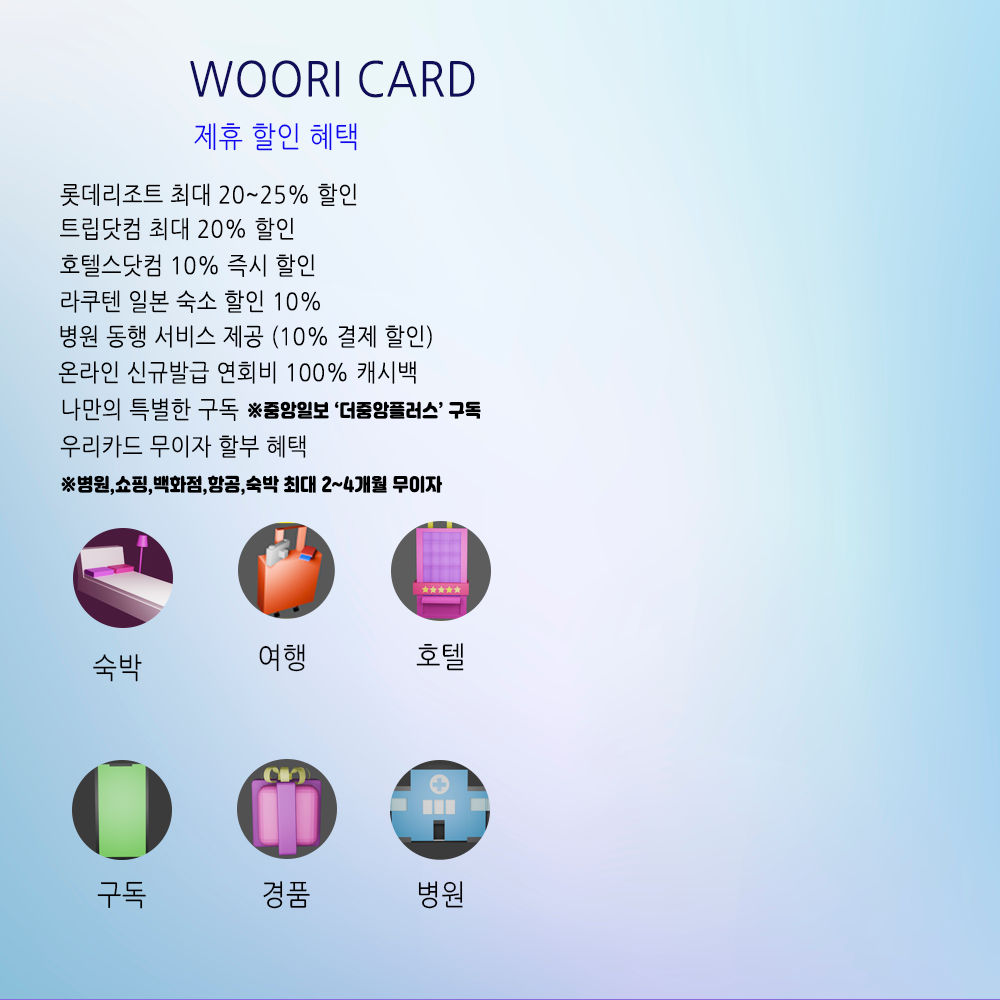
<style>
.page{position:relative;width:1000px;height:1000px}
.page>*{position:absolute;margin:0}
.t1{font:48px "NanumGothic";letter-spacing:0.02em;color:#100d59;text-transform:uppercase;scale:0.9 1}
.t2{font:29px "NanumGothic";letter-spacing:0.02em;color:#1107ef;text-transform:uppercase;scale:0.9 1}
.t3{font:24px "NanumGothic";letter-spacing:0.02em;color:#060202;text-transform:uppercase;scale:0.9 1}
.t4{font:24px "NanumGothic";letter-spacing:0.02em;color:#000000;text-transform:uppercase;scale:0.9 1}
.t5{font:18px "Jalnan2TTF";letter-spacing:0.02em;color:#000000;text-transform:uppercase;scale:0.9 1}
.t6{font:29px "NanumGothic";letter-spacing:0.02em;color:#000000;text-transform:uppercase;scale:0.9 1}
.t7{font:28.9px "NanumGothic";letter-spacing:0.02em;color:#000000;text-transform:uppercase;scale:0.9 1}
</style>
<div class="page">
<p class="t1" style="left:190px;top:60px;width:285px;height:38px">woori card</p>
<p class="t2" style="left:194px;top:123px;width:163px;height:28px">제휴 할인 혜택</p>
<p class="t3" style="left:60px;top:183px;width:297px;height:23px">롯데리조트 최대 20~25% 할인</p>
<p class="t3" style="left:60px;top:217px;width:234px;height:24px">트립닷컴 최대 20% 할인</p>
<p class="t4" style="left:60px;top:254px;width:255px;height:23px">호텔스닷컴 10% 즉시 할인</p>
<p class="t4" style="left:61px;top:290px;width:259px;height:23px">라쿠텐 일본 숙소 할인 10%</p>
<p class="t4" style="left:60px;top:325px;width:372px;height:24px">병원 동행 서비스 제공 (10% 결제 할인)</p>
<p class="t4" style="left:58px;top:361px;width:358px;height:23px">온라인 신규발급 연회비 100% 캐시백</p>
<p class="t4" style="left:62px;top:398px;width:177px;height:23px">나만의 특별한 구독</p>
<p class="t5" style="left:248px;top:401px;width:233px;height:18px">※중앙일보 ‘더중앙플러스’ 구독</p>
<p class="t4" style="left:60px;top:435px;width:246px;height:23px">우리카드 무이자 할부 혜택</p>
<p class="t5" style="left:61px;top:475px;width:382px;height:20px">※병원,쇼핑,백화점,항공,숙박 최대 2~4개월 무이자</p>
<p class="t6" style="left:93px;top:654px;width:49px;height:28px">숙박</p>
<p class="t6" style="left:259px;top:644px;width:46px;height:28px">여행</p>
<p class="t6" style="left:416px;top:643px;width:48px;height:28px">호텔</p>
<p class="t6" style="left:97px;top:881px;width:49px;height:28px">구독</p>
<p class="t6" style="left:263px;top:881px;width:47px;height:28px">경품</p>
<p class="t7" style="left:418px;top:881px;width:45px;height:28px">병원</p>
</div>
